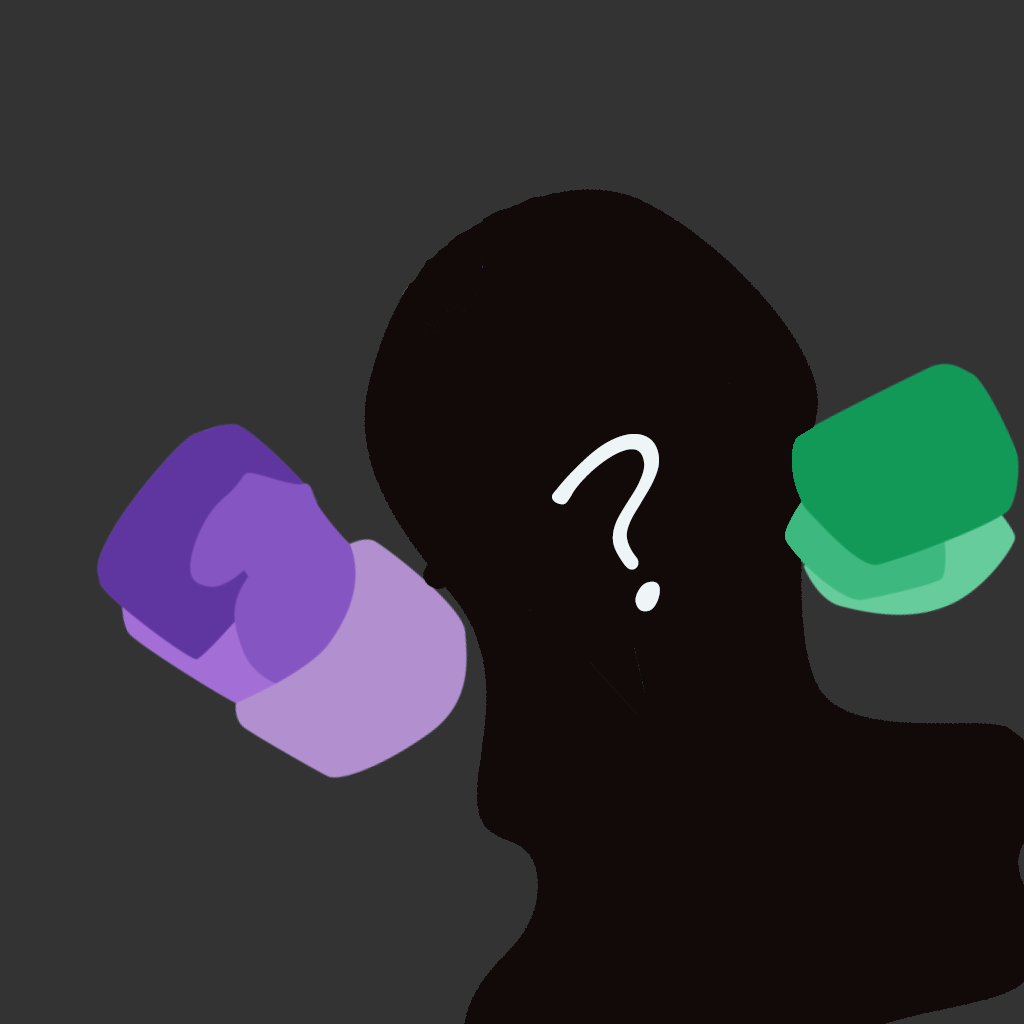
<style>
.page{position:relative;width:1024px;height:1024px;background:#333333}
.page>*{position:absolute;margin:0}
.t1{font:276.5px "InkFree";color:#eef5f7;scale:0.93 1}
</style>
<div class="page">
<p class="t1" style="left:552px;top:434px;width:108px;height:178px;rotate:-15deg">?</p>
</div>
